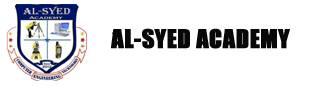
<style>
.page{position:relative;width:320px;height:86px;background:#ffffff}
.page>*{position:absolute;margin:0}
.t1{font:24px "Impact";color:#070807;font-weight:bold}
</style>
<div class="page">
<p class="t1" style="left:111px;top:28px;width:179px;height:21px">AL-SYED ACADEMY</p>
</div>
